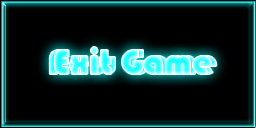
<style>
.page{position:relative;width:256px;height:128px;background:#000000}
.page>*{position:absolute;margin:0}
.t1{font:36px "Bauhaus93"}
</style>
<div class="page">
<p class="t1" style="left:49px;top:50px;width:168px;height:24px">New Game</p>
<p class="t1" style="left:54px;top:47px;width:158px;height:27px">Exit Game</p>
</div>
